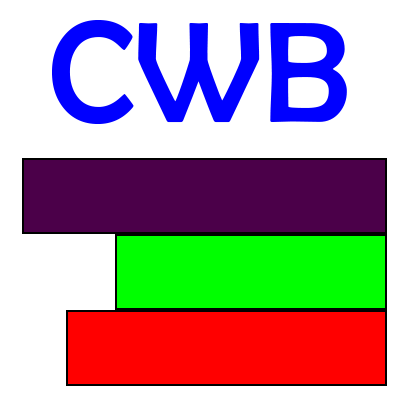
<style>
.page{position:relative;width:400px;height:400px;background:#ffffff}
.page>*{position:absolute;margin:0}
.t1{font:144.7px "BerlinSansFB-Reg";color:#0000ff}
</style>
<div class="page">
<p class="t1" style="left:52px;top:20px;width:295px;height:104px">CWB</p>
</div>
